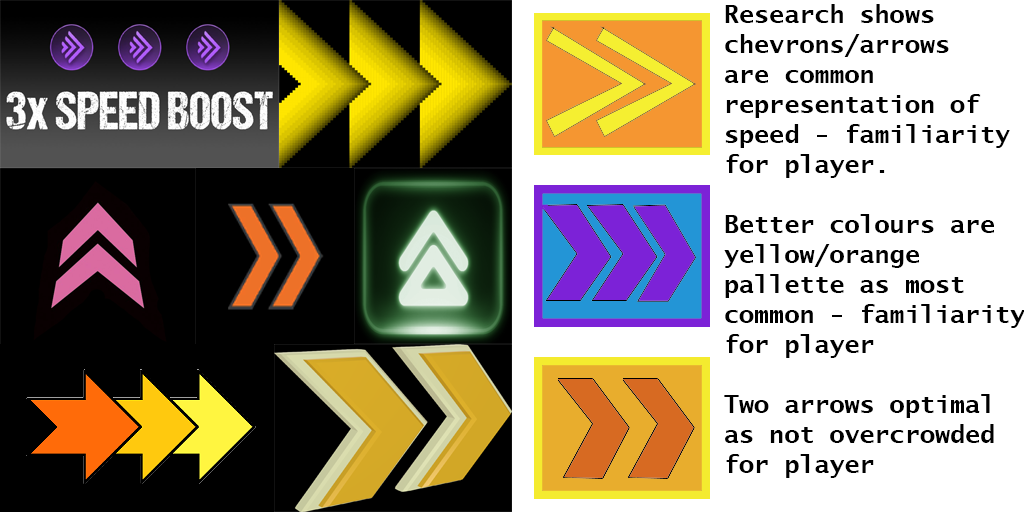
<style>
.page{position:relative;width:1024px;height:512px;background:#ffffff}
.page>*{position:absolute;margin:0}
.t1{font:25px "LucidaSans-TypewriterBold";color:#000000}
</style>
<div class="page">
<p class="t1" style="left:724px;top:4px;width:301px;height:474px">Research shows <br>chevrons/arrows<br>are common <br>representation of<br>speed - familiarity<br>for player.<br><br>Better colours are<br>yellow/orange<br>pallette as most <br>common - familiarity<br>for player<br><br>Two arrows optimal<br>as not overcrowded<br>for player</p>
</div>
